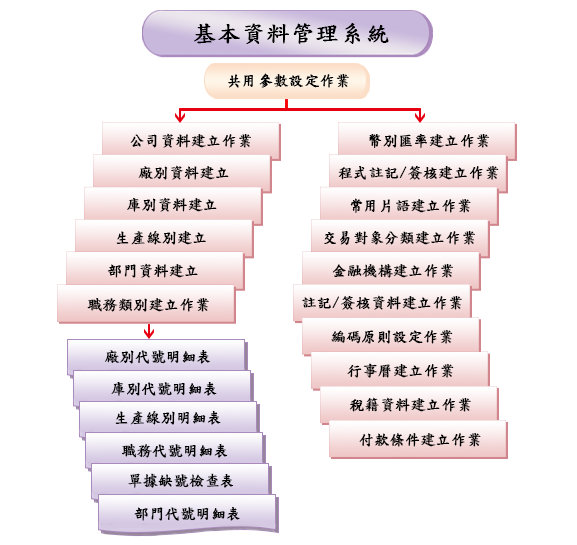
<style>
.page{position:relative;width:577px;height:545px;background:#ffffff}
.page>*{position:absolute;margin:0}
.t1{font:22.4px "DFKaiShu-SB-Estd-BF";color:#000000;font-weight:bold;scale:1.07 1}
.t2{font:15px "DFKaiShu-SB-Estd-BF";color:#000000;font-weight:bold}
</style>
<div class="page">
<p class="t1" style="left:194px;top:23px;width:195px;height:21px">基本資料管理系統</p>
<p class="t2" style="left:228px;top:73px;width:121px;height:15px">共用參數設定作業</p>
<p class="t2" style="left:130px;top:133px;width:121px;height:15px">公司資料建立作業</p>
<p class="t2" style="left:369px;top:133px;width:120px;height:15px">幣別匯率建立作業</p>
<p class="t2" style="left:138px;top:165px;width:91px;height:15px">廠別資料建立</p>
<p class="t2" style="left:338px;top:165px;width:161px;height:15px">程式註記/簽核建立作業</p>
<p class="t2" style="left:127px;top:197px;width:90px;height:15px">庫別資料建立</p>
<p class="t2" style="left:350px;top:198px;width:121px;height:15px">常用片語建立作業</p>
<p class="t2" style="left:116px;top:230px;width:90px;height:15px">生產線別建立</p>
<p class="t2" style="left:324px;top:230px;width:151px;height:15px">交易對象分類建立作業</p>
<p class="t2" style="left:107px;top:263px;width:91px;height:15px">部門資料建立</p>
<p class="t2" style="left:332px;top:263px;width:121px;height:15px">金融機構建立作業</p>
<p class="t2" style="left:87px;top:297px;width:122px;height:15px">職務類別建立作業</p>
<p class="t2" style="left:302px;top:295px;width:160px;height:15px">註記/簽核資料建立作業</p>
<p class="t2" style="left:331px;top:329px;width:122px;height:15px">編碼原則設定作業</p>
<p class="t2" style="left:105px;top:350px;width:105px;height:14px">廠別代號明細表</p>
<p class="t2" style="left:347px;top:363px;width:107px;height:15px">行事曆建立作業</p>
<p class="t2" style="left:111px;top:381px;width:106px;height:15px">庫別代號明細表</p>
<p class="t2" style="left:349px;top:397px;width:122px;height:15px">稅籍資料建立作業</p>
<p class="t2" style="left:115px;top:411px;width:106px;height:14px">生產線別明細表</p>
<p class="t2" style="left:359px;top:433px;width:122px;height:14px">付款條件建立作業</p>
<p class="t2" style="left:121px;top:443px;width:107px;height:15px">職務代號明細表</p>
<p class="t2" style="left:128px;top:473px;width:106px;height:15px">單據缺號檢查表</p>
<p class="t2" style="left:134px;top:507px;width:106px;height:14px">部門代號明細表</p>
</div>
